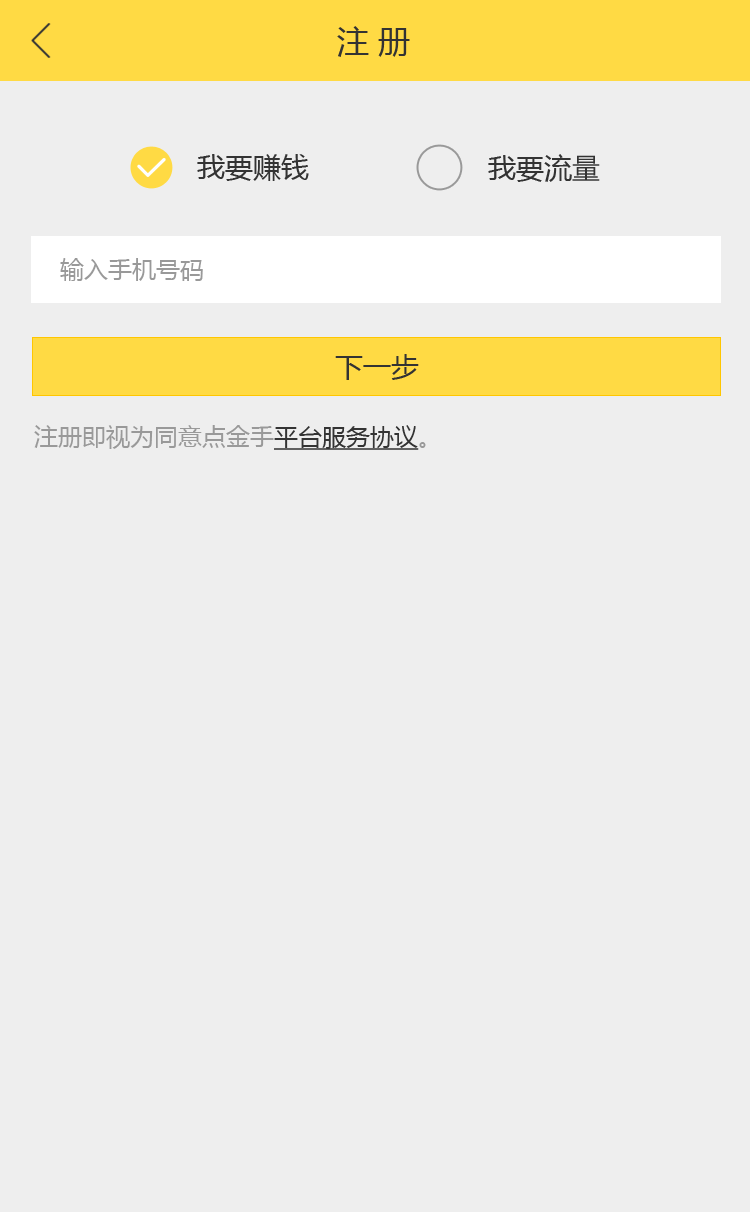
<style>
.page{position:relative;width:750px;height:1212px;background:#eeeeee}
.page>*{position:absolute;margin:0}
.t1{font:32px "MicrosoftYaHei";color:#333333}
.t2{font:28px "MicrosoftYaHei";color:#333333}
.t3{font:24px "MicrosoftYaHei";color:#999999}
.t4{font:24px "MicrosoftYaHei";color:#333333;text-decoration:underline}
</style>
<div class="page">
<p class="t1" style="left:337px;top:26px;width:73px;height:31px">注 册</p>
<p class="t2" style="left:197px;top:154px;width:112px;height:27px">我要赚钱</p>
<p class="t2" style="left:488px;top:154px;width:112px;height:28px">我要流量</p>
<p class="t3" style="left:60px;top:258px;width:143px;height:23px">输入手机号码</p>
<p class="t2" style="left:335px;top:354px;width:84px;height:26px">下一步</p>
<p class="t3" style="left:34px;top:425px;width:392px;height:25px">注册即视为同意点金手<span class="t4">平台服务协议</span>。</p>
</div>
